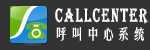
<style>
.page{position:relative;width:150px;height:50px;background:#333333}
.page>*{position:absolute;margin:0}
.t1{font:20px "Algerian";letter-spacing:0.1em;color:#ffffff;scale:0.66 1}
.t2{font:14px "FZYTK--GBK1-0";letter-spacing:0.1em;color:#ffffff}
</style>
<div class="page">
<p class="t1" style="left:55px;top:8px;width:93px;height:16px">CAllCenter</p>
<p class="t2" style="left:56px;top:27px;width:88px;height:14px">呼叫中心系统</p>
</div>
